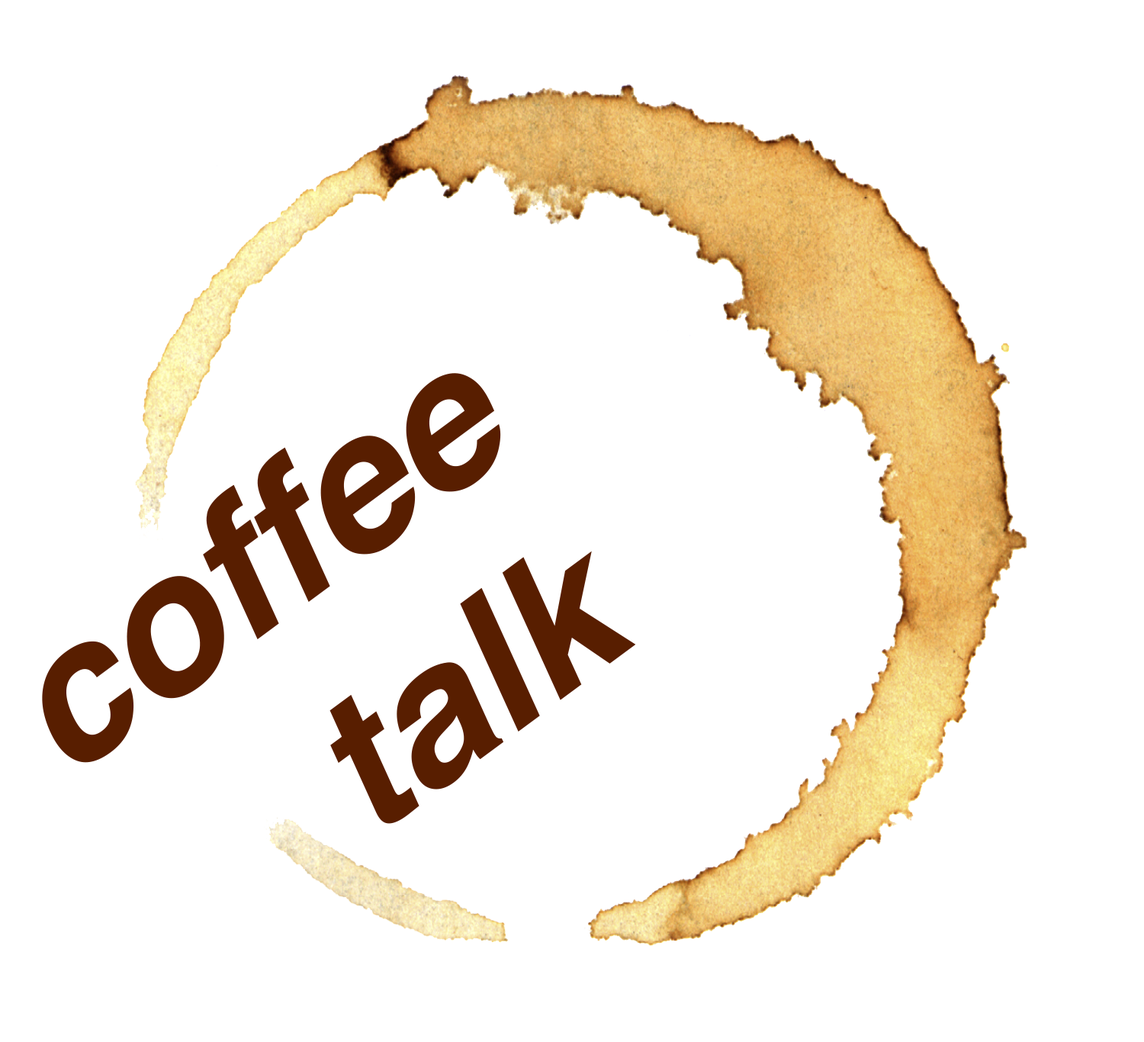
<style>
.page{position:relative;width:1144px;height:1042px;background:#ffffff}
.page>*{position:absolute;margin:0}
.t1{font:190.7px "Helvetica-BoldOblique";color:#581e00}
</style>
<div class="page">
<p class="t1" style="left:42px;top:373px;width:594px;height:451px;rotate:-36deg">coffee <br>    talk</p>
</div>
